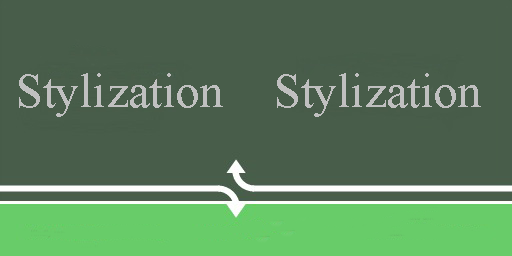
<style>
.page{position:relative;width:512px;height:256px;background:#485d4a}
.page>*{position:absolute;margin:0}
.t1{font:48px "TimesNewRomanPSMT";color:#c0c0c0}
</style>
<div class="page">
<p class="t1" style="left:19px;top:73px;width:204px;height:44px">Stylization</p>
<p class="t1" style="left:277px;top:73px;width:204px;height:44px">Stylization</p>
</div>
